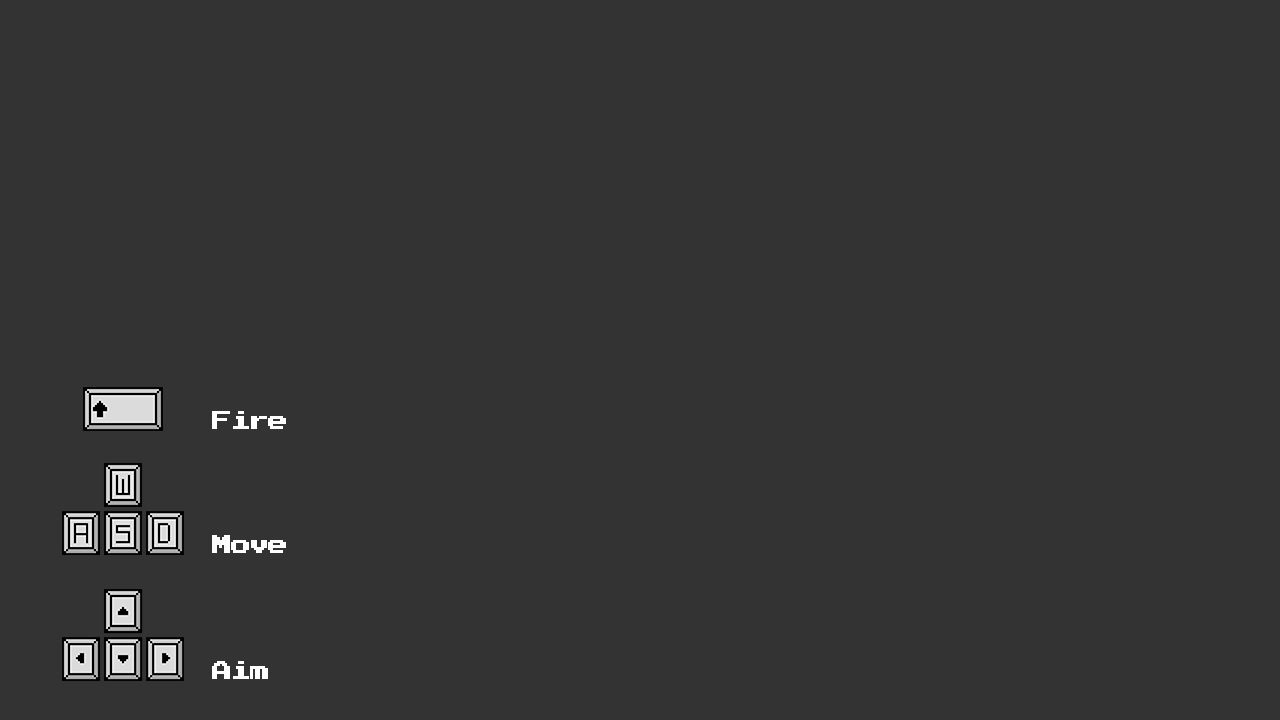
<style>
.page{position:relative;width:1280px;height:720px;background:#333333}
.page>*{position:absolute;margin:0}
.t1{font:20px "PressStart2P";letter-spacing:-0.06em;color:#ffffff}
</style>
<div class="page">
<p class="t1" style="left:212px;top:411px;width:74px;height:18px">Fire</p>
<p class="t1" style="left:212px;top:535px;width:74px;height:18px">Move</p>
<p class="t1" style="left:212px;top:661px;width:56px;height:18px">Aim</p>
</div>
